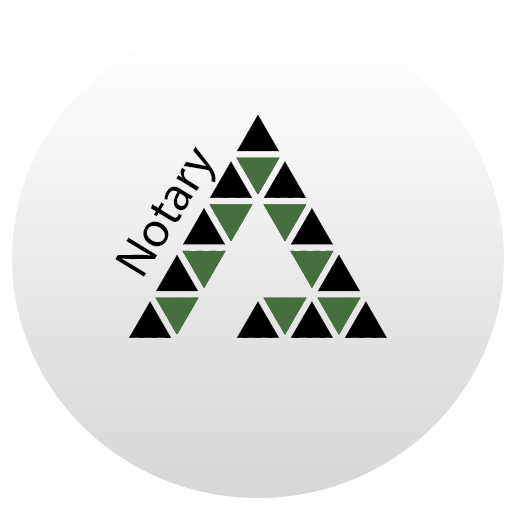
<style>
.page{position:relative;width:516px;height:516px;background:#ffffff}
.page>*{position:absolute;margin:0}
.t1{font:50px "MyriadPro-Regular";color:#000000}
</style>
<div class="page">
<p class="t1" style="left:115px;top:146px;width:101px;height:131px;rotate:-58deg">Notary</p>
</div>
